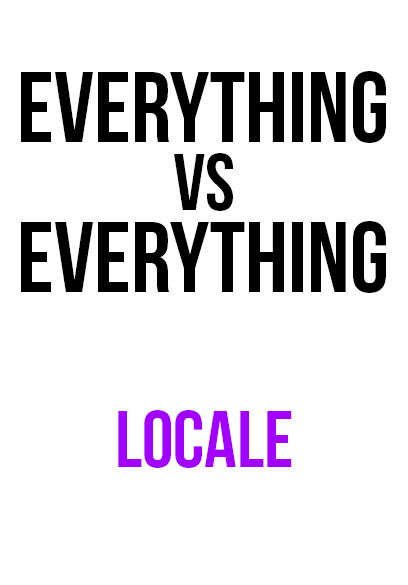
<style>
.page{position:relative;width:408px;height:585px;background:#ffffff}
.page>*{position:absolute;margin:0}
.t1{font:100px "BebasNeue";color:#000000}
.t2{font:80px "BebasNeue";color:#000000}
.t3{font:80px "BebasNeue";color:#a200ff}
</style>
<div class="page">
<p class="t1" style="left:21px;top:71px;width:365px;height:72px">everything</p>
<p class="t2" style="left:174px;top:153px;width:59px;height:58px">vs</p>
<p class="t1" style="left:21px;top:221px;width:365px;height:72px">everything</p>
<p class="t3" style="left:118px;top:410px;width:174px;height:58px">locale</p>
</div>
